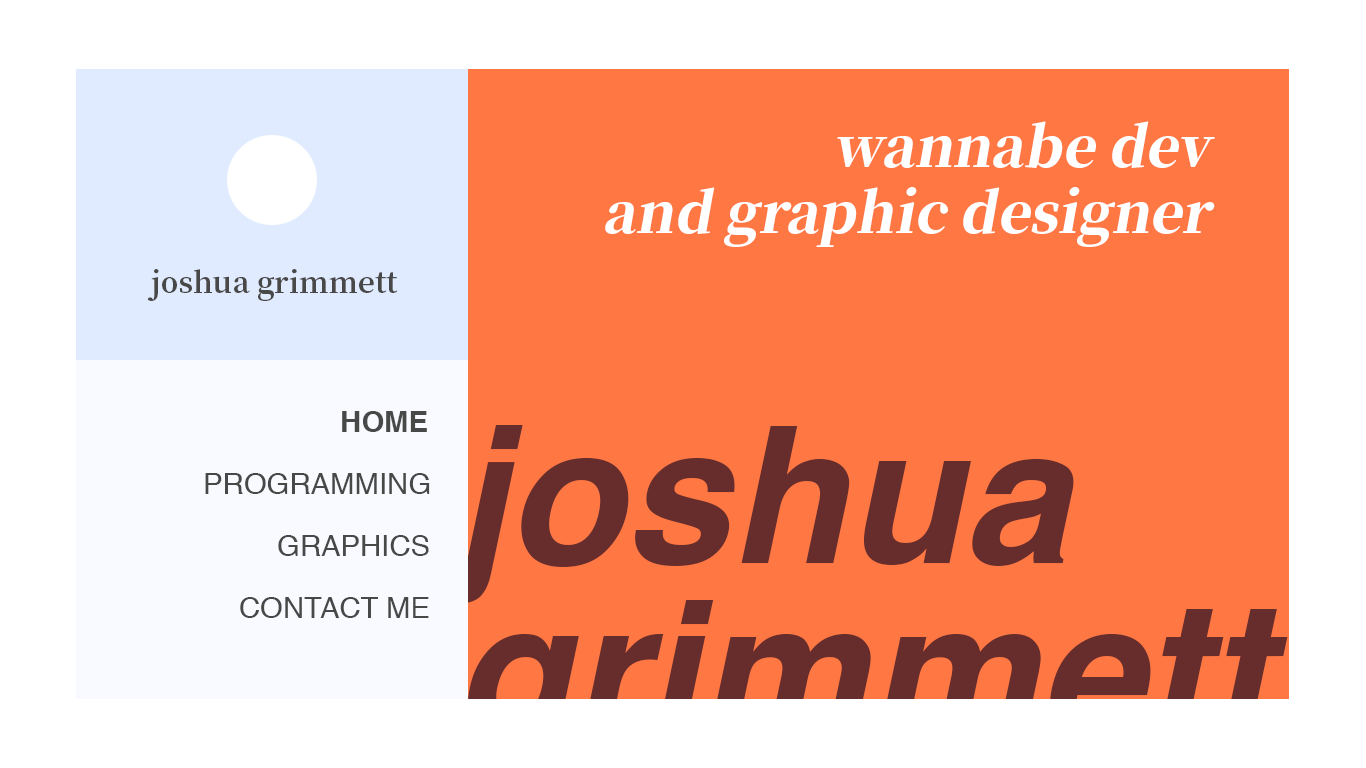
<style>
.page{position:relative;width:1366px;height:768px;background:#ff7843}
.page>*{position:absolute;margin:0}
.t1{font:55.2px "NotoSerifKR-Black";color:#ffffff;font-style:italic}
.t2{font:29.3px "NotoSerifKR-Bold";color:#484848}
.t3{font:29.3px "Helvetica-Bold";color:#484848}
.t4{font:29.3px "Helvetica";color:#484848}
</style>
<div class="page">
<p class="t1" style="left:605px;top:121px;width:610px;height:126px;text-align:right">wannabe dev<br>and graphic designer</p>
<p class="t2" style="left:147px;top:269px;width:251px;height:32px">joshua grimmett</p>
<p class="t3" style="left:342px;top:411px;width:85px;height:21px">HOME</p>
<p class="t4" style="left:205px;top:473px;width:225px;height:21px">PROGRAMMING</p>
<p class="t4" style="left:278px;top:535px;width:151px;height:21px">GRAPHICS</p>
<p class="t4" style="left:240px;top:597px;width:189px;height:21px">CONTACT ME</p>
</div>
